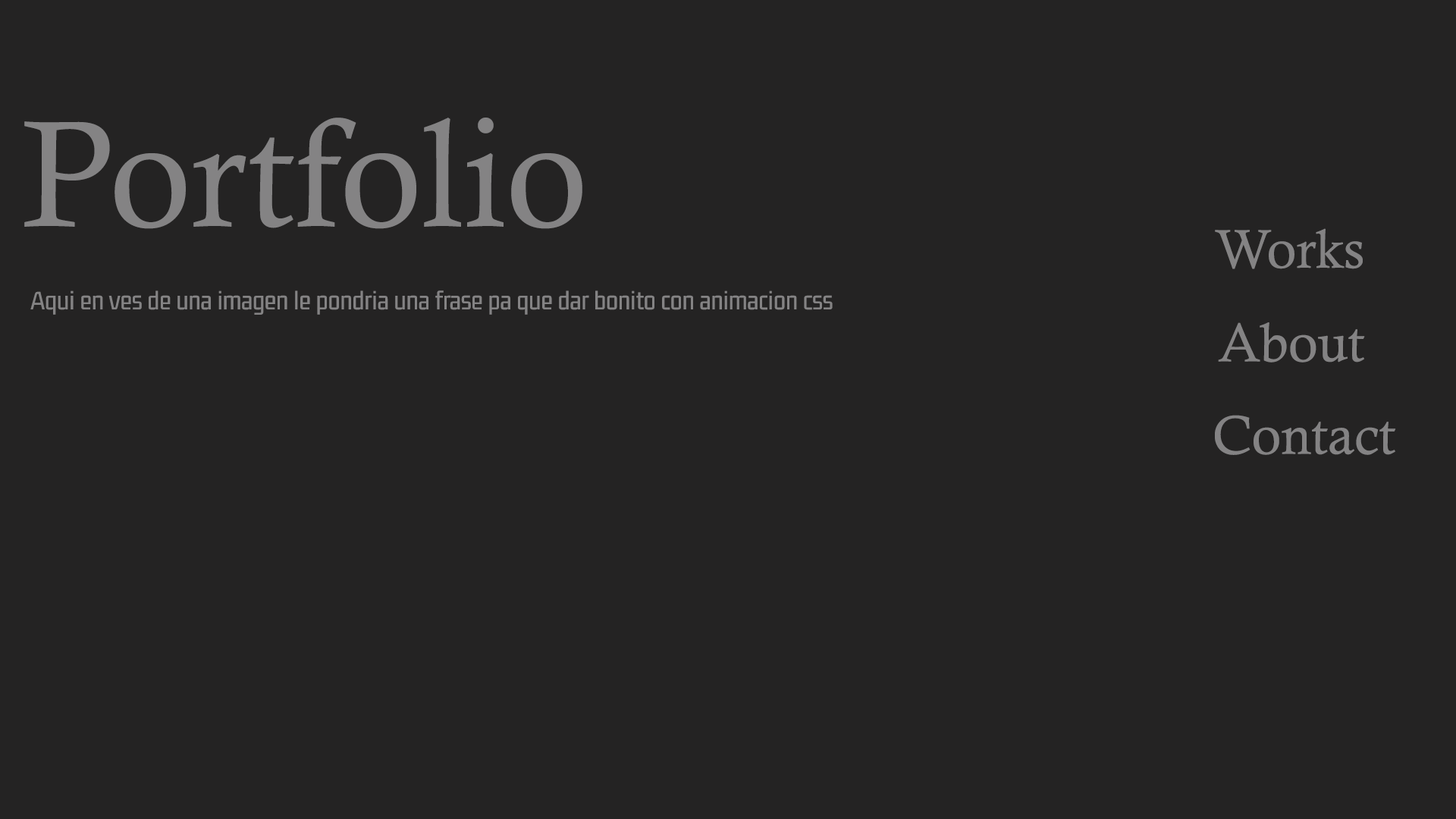
<style>
.page{position:relative;width:1456px;height:819px;background:#242323}
.page>*{position:absolute;margin:0}
.t1{font:151.7px "CalistoMT";color:#848384}
.t2{font:54.6px "CalistoMT";color:#848384}
.t3{font:27.3px "GemunuLibre-Regular";color:#848384}
</style>
<div class="page">
<p class="t1" style="left:24px;top:118px;width:558px;height:111px">Portfolio</p>
<p class="t2" style="left:1215px;top:228px;width:148px;height:41px">Works</p>
<p class="t3" style="left:30px;top:290px;width:803px;height:25px">Aqui en ves de una imagen le pondria una frase pa que dar bonito con animacion css</p>
<p class="t2" style="left:1218px;top:322px;width:147px;height:40px">About</p>
<p class="t2" style="left:1215px;top:415px;width:181px;height:40px">Contact</p>
</div>
